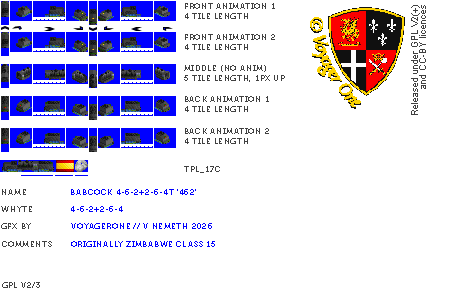
<style>
.page{position:relative;width:450px;height:300px;background:#ffffff}
.page>*{position:absolute;margin:0}
.t1{font:8px "Museo700-Regular";letter-spacing:0.075em;color:#404040;text-transform:uppercase}
.t2{font:8px "Museo700-Regular";letter-spacing:0.075em;color:#0000ff;text-transform:uppercase}
</style>
<div class="page">
<p class="t1" style="left:185px;top:3px;width:90px;height:16px">front Animation 1<br>4 tile length</p>
<p class="t1" style="left:185px;top:34px;width:90px;height:16px">front Animation 2<br>4 tile length</p>
<p class="t1" style="left:184px;top:65px;width:101px;height:17px">middle (no anim)<br>5 tile length, 1px up</p>
<p class="t1" style="left:185px;top:96px;width:84px;height:16px">back animation 1<br>4 tile length</p>
<p class="t1" style="left:185px;top:128px;width:84px;height:16px">back Animation 2<br>4 tile length</p>
<p class="t1" style="left:184px;top:166px;width:36px;height:7px">tpl_17c</p>
<p class="t1" style="left:2px;top:189px;width:24px;height:6px">name</p>
<p class="t2" style="left:71px;top:189px;width:125px;height:6px">Babcock 4-6-2+2-6-4T '462'</p>
<p class="t1" style="left:1px;top:206px;width:31px;height:6px">whyte</p>
<p class="t2" style="left:71px;top:206px;width:52px;height:6px">4-6-2+2-6-4</p>
<p class="t1" style="left:1px;top:223px;width:30px;height:6px">gfx by</p>
<p class="t2" style="left:71px;top:223px;width:141px;height:6px">voyagerone // v nemeth 2026</p>
<p class="t1" style="left:2px;top:241px;width:50px;height:6px">comments</p>
<p class="t2" style="left:71px;top:241px;width:144px;height:6px">originally zimbabwe class 15</p>
<p class="t1" style="left:2px;top:282px;width:38px;height:6px">gpl v2/3</p>
</div>
